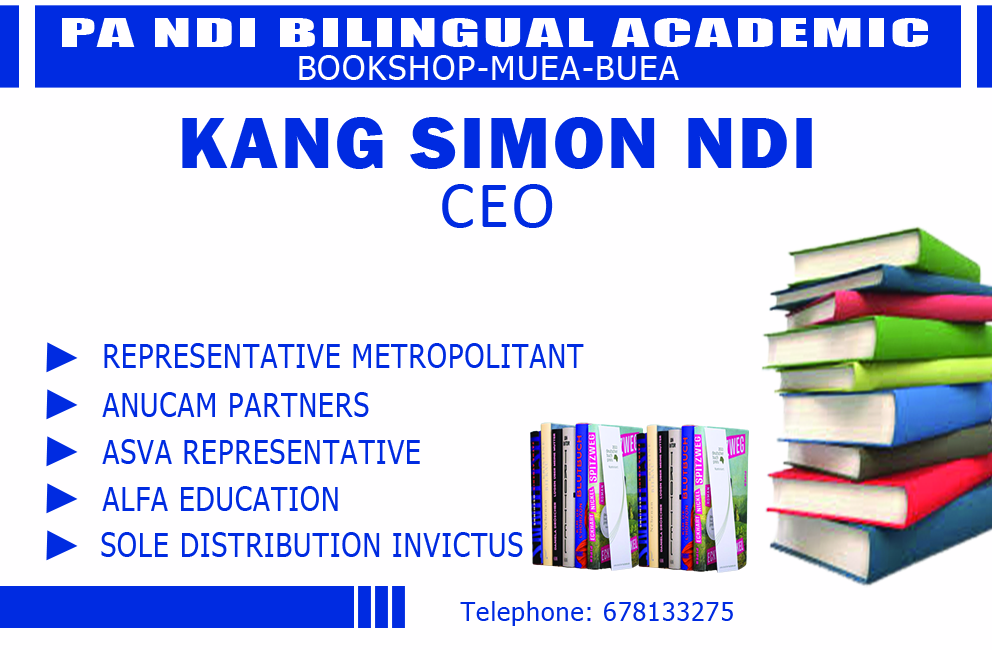
<style>
.page{position:relative;width:992px;height:650px;background:#fffeff}
.page>*{position:absolute;margin:0}
.t1{font:36.7px "Impact";letter-spacing:0.04em;color:#fffeff;scale:1.98 1}
.t2{font:33.3px "Tahoma";letter-spacing:0.04em;color:#fffeff}
.t3{font:75px "FranklinGothic-Heavy";letter-spacing:0.04em;color:#002be1}
.t4{font:66.7px "Calibri";letter-spacing:0.04em;color:#002be1}
.t5{font:33.3px "Tahoma";letter-spacing:0.04em;color:#002be1;scale:0.84 1}
.t6{font:25px "Tahoma";letter-spacing:0.04em;color:#002be1}
</style>
<div class="page">
<p class="t1" style="left:62px;top:18px;width:866px;height:29px">PA NDI BILINGUAL ACADEMIC</p>
<p class="t2" style="left:299px;top:55px;width:380px;height:25px">BOOKSHOP-MUEA-BUEA</p>
<p class="t3" style="left:182px;top:117px;width:630px;height:52px">KANG SIMON NDI</p>
<p class="t4" style="left:442px;top:184px;width:111px;height:44px">CEO</p>
<p class="t5" style="left:104px;top:343px;width:480px;height:25px">REPRESENTATIVE METROPOLITANT</p>
<p class="t5" style="left:102px;top:392px;width:267px;height:25px">ANUCAM PARTNERS</p>
<p class="t5" style="left:102px;top:439px;width:318px;height:25px">ASVA REPRESENTATIVE</p>
<p class="t5" style="left:102px;top:486px;width:236px;height:25px">ALFA EDUCATION</p>
<p class="t5" style="left:101px;top:532px;width:422px;height:25px">SOLE DISTRIBUTION INVICTUS</p>
<p class="t6" style="left:460px;top:601px;width:273px;height:25px">Telephone: 678133275</p>
</div>
